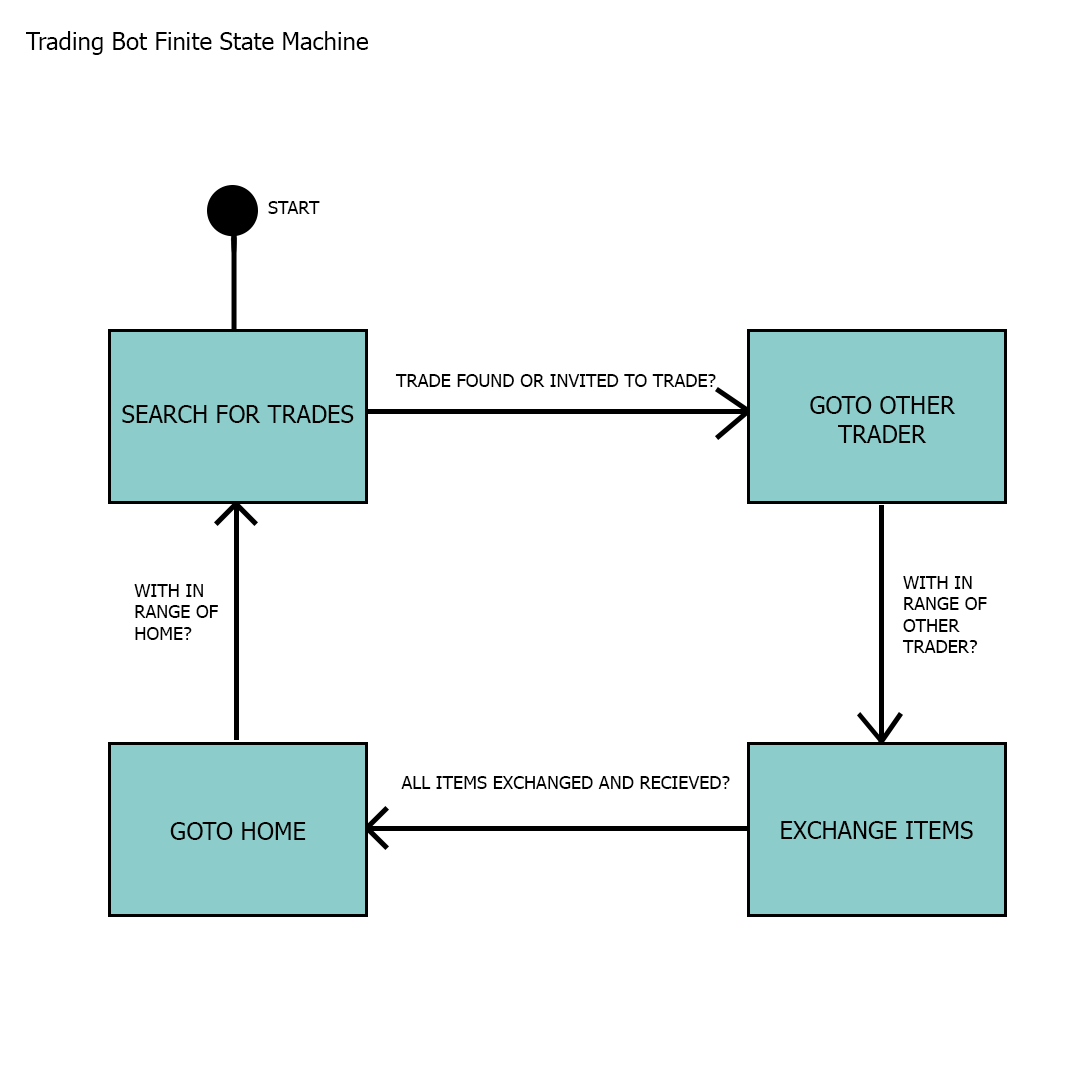
<style>
.page{position:relative;width:1080px;height:1080px;background:#ffffff}
.page>*{position:absolute;margin:0}
.t1{font:24px "Tahoma";color:#000000}
.t2{font:18px "Tahoma";color:#000000}
</style>
<div class="page">
<p class="t1" style="left:26px;top:31px;width:342px;height:24px">Trading Bot Finite State Machine</p>
<p class="t2" style="left:268px;top:201px;width:52px;height:13px">START</p>
<p class="t2" style="left:395px;top:374px;width:321px;height:13px">TRADE FOUND OR INVITED TO TRADE?</p>
<p class="t1" style="left:810px;top:396px;width:146px;height:47px;text-align:center">GOTO OTHER<br>TRADER</p>
<p class="t1" style="left:122px;top:405px;width:232px;height:18px">SEARCH FOR TRADES</p>
<p class="t2" style="left:902px;top:576px;width:85px;height:77px">WITH IN<br>RANGE OF<br>OTHER<br>TRADER?</p>
<p class="t2" style="left:134px;top:584px;width:84px;height:56px">WITH IN<br>RANGE OF<br>HOME?</p>
<p class="t2" style="left:401px;top:776px;width:329px;height:13px">ALL ITEMS EXCHANGED AND RECIEVED?</p>
<p class="t1" style="left:170px;top:822px;width:136px;height:18px">GOTO HOME</p>
<p class="t1" style="left:781px;top:821px;width:192px;height:18px">EXCHANGE ITEMS</p>
</div>
